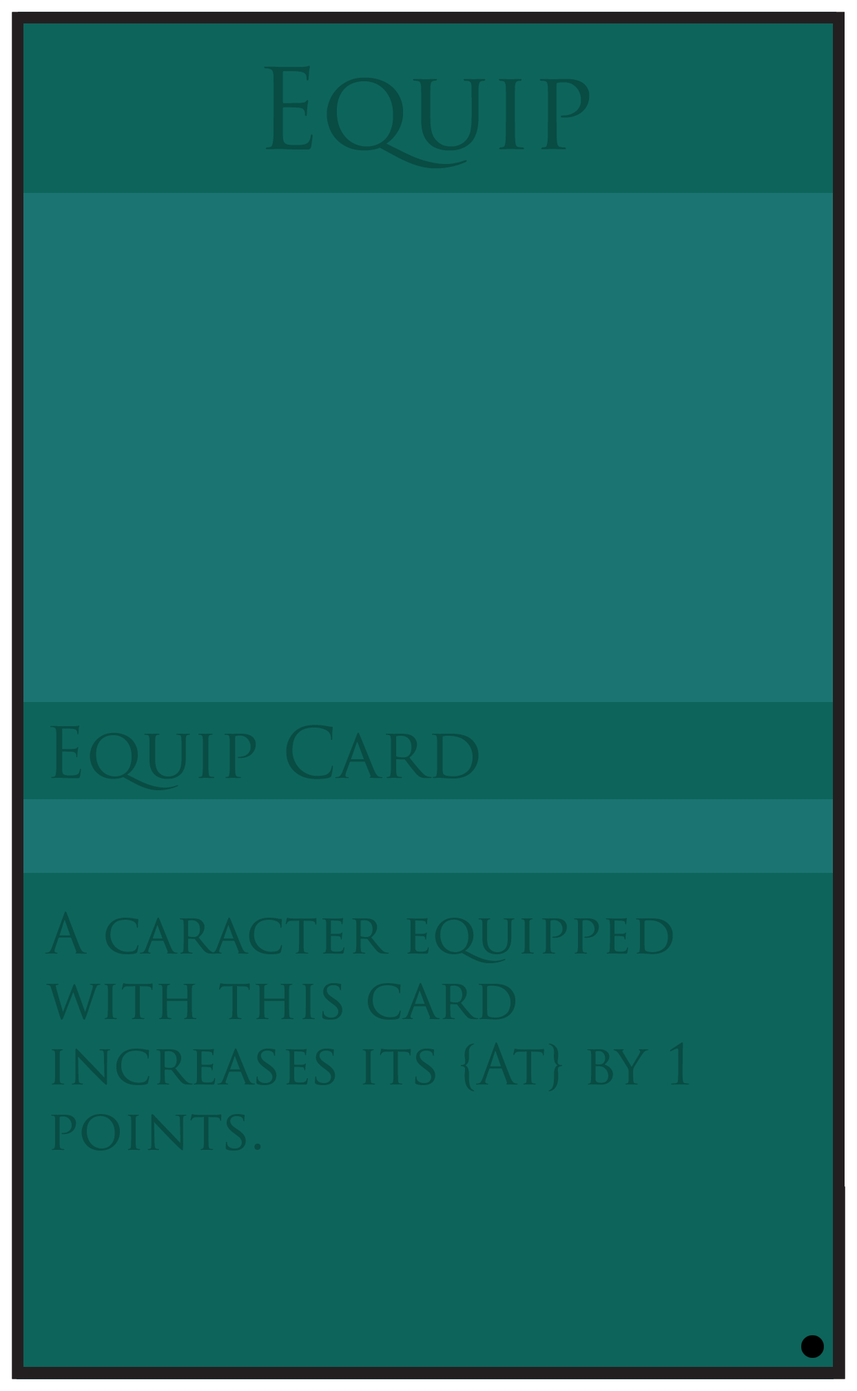
<style>
.page{position:relative;width:857px;height:1391px;background:#0d645a}
.page>*{position:absolute;margin:0}
.t1{font:109.1px "TrajanPro-Regular";color:#084c44}
.t2{font:68.9px "TrajanPro-Regular";color:#084c44}
.t3{font:54.5px "TrajanPro-Regular";color:#084c44}
</style>
<div class="page">
<p class="t1" style="left:264px;top:65px;width:326px;height:104px">Equip</p>
<p class="t2" style="left:50px;top:725px;width:429px;height:65px">Equip Card</p>
<p class="t3" style="left:45px;top:912px;width:645px;height:239px">A caracter equipped <br>with this card <br>increases its {At} by 1 <br>points.</p>
</div>
